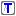
<style>
.page{position:relative;width:16px;height:16px;background:#ffffff}
.page>*{position:absolute;margin:0}
.t1{font:14px "Arial-BoldMT";color:#0000ff}
</style>
<div class="page">
<p class="t1" style="left:4px;top:3px;width:8px;height:10px">T</p>
</div>
